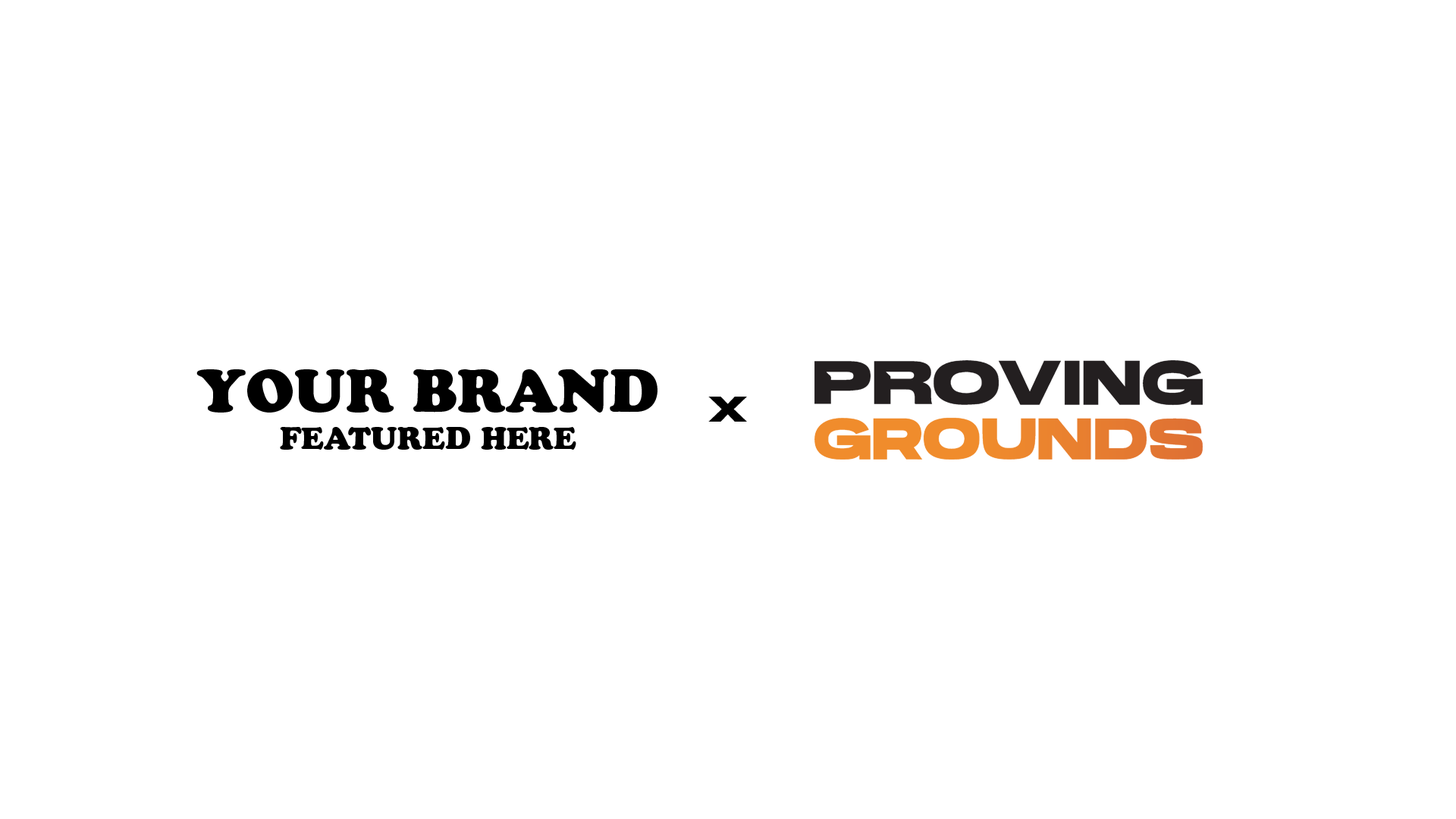
<style>
.page{position:relative;width:1456px;height:819px;background:#ffffff}
.page>*{position:absolute;margin:0}
.t1{font:30.8px "CooperBlackStd";color:#000000;text-transform:uppercase}
.t2{font:59.3px "CooperBlackStd";color:#000000;text-transform:uppercase}
.t3{font:37.9px "AkiraExpanded-SuperBold";color:#000000;text-transform:uppercase}
</style>
<div class="page">
<p class="t1" style="left:196px;top:369px;width:461px;height:81px;text-align:center"><span class="t2">YOUR BRAND<br></span>Featured HERE</p>
<p class="t3" style="left:708px;top:397px;width:39px;height:25px">X</p>
</div>
